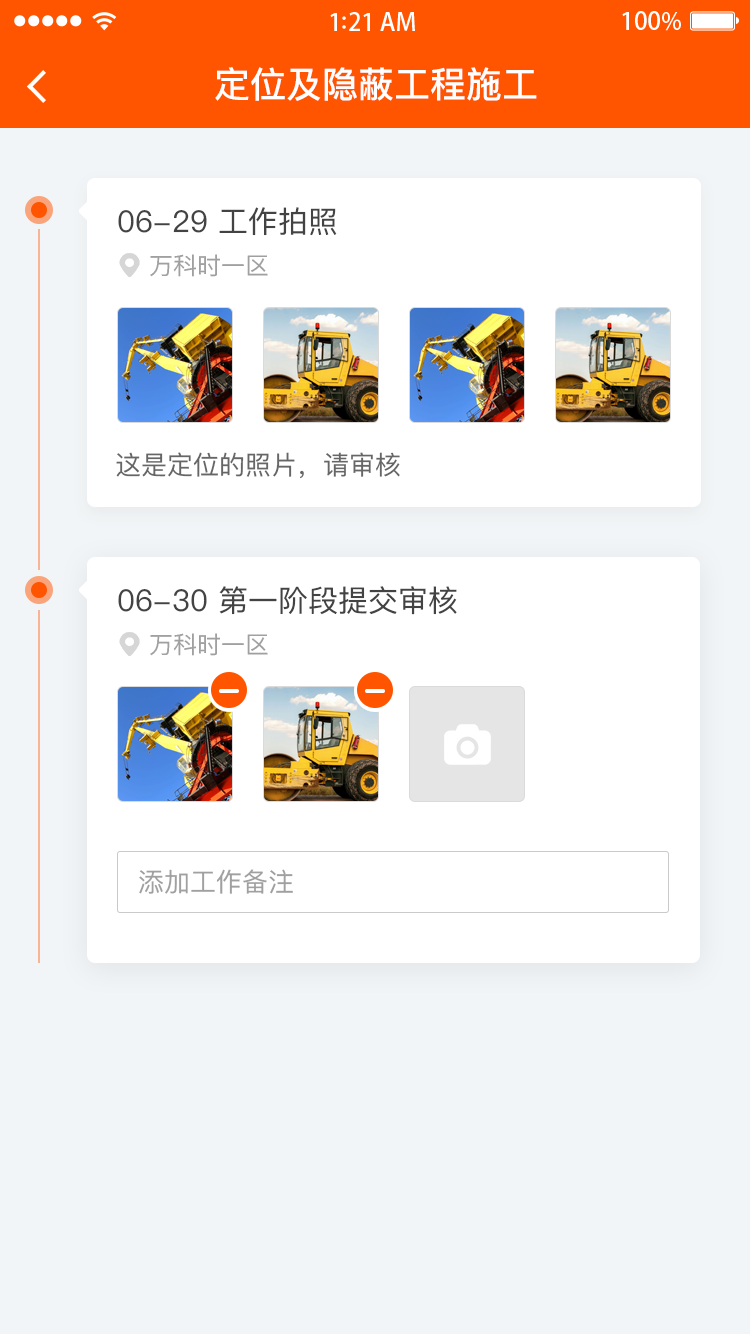
<style>
.page{position:relative;width:750px;height:1334px;background:#f2f5f7}
.page>*{position:absolute;margin:0}
.t1{font:36px "PingFangSC-Medium";color:#ffffff}
.t2{font:30px "PingFangSC-Regular";color:#434343}
.t3{font:24px "PingFangSC-Regular";color:#a0a0a0}
.t4{font:26px "PingFangSC-Regular";color:#666666}
.t5{font:26px "PingFangSC-Regular";color:#a0a0a0}
</style>
<div class="page">
<p class="t1" style="left:215px;top:67px;width:322px;height:34px">定位及隐蔽工程施工</p>
<p class="t2" style="left:118px;top:207px;width:219px;height:29px">06-29 工作拍照</p>
<p class="t3" style="left:150px;top:254px;width:118px;height:23px">万科时一区</p>
<p class="t4" style="left:116px;top:452px;width:284px;height:27px">这是定位的照片，请审核</p>
<p class="t2" style="left:118px;top:586px;width:339px;height:29px">06-30 第一阶段提交审核</p>
<p class="t3" style="left:150px;top:633px;width:118px;height:23px">万科时一区</p>
<p class="t5" style="left:139px;top:869px;width:154px;height:25px">添加工作备注</p>
</div>
